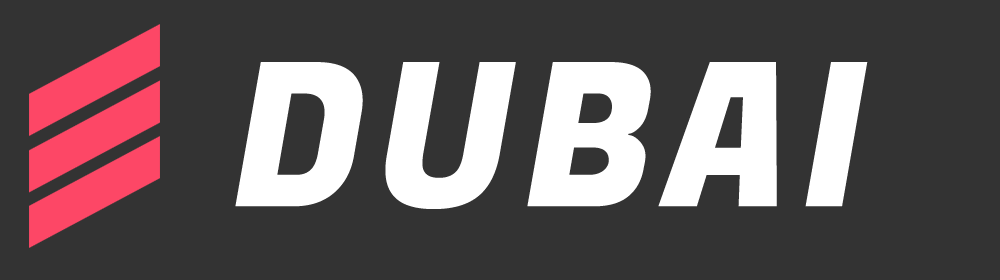
<style>
.page{position:relative;width:1000px;height:280px;background:#333333}
.page>*{position:absolute;margin:0}
.t1{font:200px "FugazOne-Regular";letter-spacing:0.05em;color:#ffffff}
</style>
<div class="page">
<p class="t1" style="left:235px;top:62px;width:633px;height:147px">DUBAI</p>
</div>
